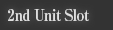
<style>
.page{position:relative;width:113px;height:30px;background:#333333}
.page>*{position:absolute;margin:0}
.t1{font:16px "RyuminPro-ExBold";letter-spacing:-0.04em;color:#dfdfdf;scale:0.9 1}
</style>
<div class="page">
<p class="t1" style="left:8px;top:8px;width:81px;height:13px">2nd Unit Slot</p>
</div>
